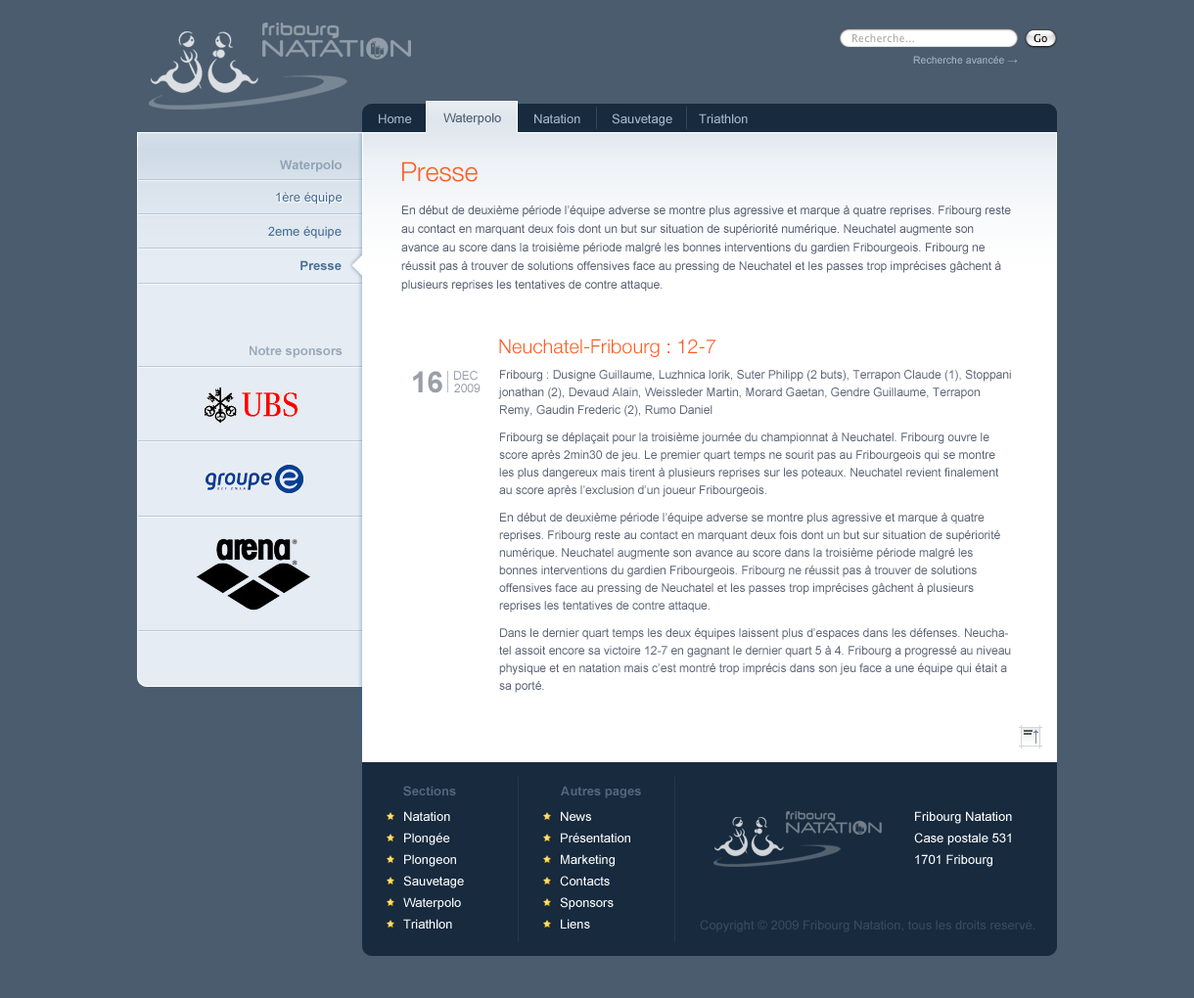
<style>
.page{position:relative;width:1194px;height:998px;background:#4a5c6e}
.page>*{position:absolute;margin:0}
.t1{font:10.3px "ArialMT";color:#a5b7ca}
.t2{font:12.7px "ArialMT";color:#a4b7cb}
.t3{font:12.7px "ArialMT";color:#4a5c6e}
.t4{font:12.7px "Arial-BoldMT";color:#8fa2b4}
.t5{font:26.4px "HelveticaNeue-Light";color:#fd5d25}
.t6{font:12.7px "ArialMT";color:#486e94}
.t7{font:11.7px/18.6px "ArialMT";color:#586073}
.t8{font:12.7px "Arial-BoldMT";color:#486e94}
.t9{font:19.6px "HelveticaNeue-Light";color:#fd5d25}
.t10{font:12.7px "Arial-BoldMT";color:#98a8b8}
.t11{font:29.4px "Arial-BoldMT";color:#999ea9}
.t12{font:11.7px "ArialMT";color:#979ca7}
.t13{font:11.7px/17.6px "ArialMT";color:#5d6476}
.t14{font:12.7px "Arial-BoldMT";color:#53667b}
.t15{font:12.7px/21.5px "ArialMT";color:#fcfdfd}
.t16{font:12.7px/21.5px "ArialMT";color:#ffffff}
.t17{font:12.7px "ArialMT";color:#364b61}
</style>
<div class="page">
<p class="t1" style="left:913px;top:56px;width:105px;height:8px">Recherche avancée →</p>
<p class="t2" style="left:379px;top:114px;width:33px;height:9px">Home</p>
<p class="t3" style="left:443px;top:113px;width:58px;height:12px">Waterpolo</p>
<p class="t2" style="left:534px;top:114px;width:46px;height:9px">Natation</p>
<p class="t2" style="left:612px;top:114px;width:61px;height:12px">Sauvetage</p>
<p class="t2" style="left:699px;top:114px;width:49px;height:9px">Triathlon</p>
<p class="t4" style="left:280px;top:160px;width:62px;height:12px">Waterpolo</p>
<p class="t5" style="left:402px;top:162px;width:76px;height:20px">Presse</p>
<p class="t6" style="left:276px;top:192px;width:67px;height:13px">1ère équipe</p>
<p class="t7" style="left:401px;top:206px;width:610px;height:86px">En début de deuxième période l’équipe adverse se montre plus agressive et marque à quatre reprises. Fribourg reste au contact en marquant deux fois dont un but sur situation de supériorité numérique. Neuchatel augmente son avance au score dans la troisième période malgré les bonnes interventions du gardien Fribourgeois. Fribourg ne réussit pas à trouver de solutions offensives face au pressing de Neuchatel et les passes trop imprécises gâchent à plusieurs reprises les tentatives de contre attaque.</p>
<p class="t6" style="left:268px;top:226px;width:74px;height:13px">2eme équipe</p>
<p class="t8" style="left:301px;top:260px;width:41px;height:10px">Presse</p>
<p class="t9" style="left:499px;top:339px;width:217px;height:18px">Neuchatel-Fribourg : 12-7</p>
<p class="t10" style="left:250px;top:346px;width:93px;height:12px">Notre sponsors</p>
<p class="t11" style="left:413px;top:371px;width:29px;height:23px">16</p>
<p class="t12" style="left:454px;top:371px;width:24px;height:10px">DEC</p>
<p class="t13" style="left:498px;top:370px;width:513px;height:323px">Fribourg : Dusigne Guillaume, Luzhnica lorik, Suter Philipp (2 buts), Terrapon Claude (1), Stoppani jonathan (2), Devaud Alain, Weissleder Martin, Morard Gaetan, Gendre Guillaume, Terrapon Remy, Gaudin Frederic (2), Rumo Daniel<br> <br>Fribourg se déplaçait pour la troisième journée du championnat à Neuchatel. Fribourg ouvre le score après 2min30 de jeu. Le premier quart temps ne sourit pas au Fribourgeois qui se montre les plus dangereux mais tirent à plusieurs reprises sur les poteaux. Neuchatel revient finalement au score après l’exclusion d’un joueur Fribourgeois.<br> <br>En début de deuxième période l’équipe adverse se montre plus agressive et marque à quatre reprises. Fribourg reste au contact en marquant deux fois dont un but sur situation de supériorité numérique. Neuchatel augmente son avance au score dans la troisième période malgré les bonnes interventions du gardien Fribourgeois. Fribourg ne réussit pas à trouver de solutions offensives face au pressing de Neuchatel et les passes trop imprécises gâchent à plusieurs reprises les tentatives de contre attaque.<br> <br>Dans le dernier quart temps les deux équipes laissent plus d’espaces dans les défenses. Neuchatel assoit encore sa victoire 12-7 en gagnant le dernier quart 5 à 4. Fribourg a progressé au niveau physique et en natation mais c’est montré trop imprécis dans son jeu face a une équipe qui était a sa porté.</p>
<p class="t12" style="left:454px;top:384px;width:27px;height:9px">2009</p>
<p class="t14" style="left:403px;top:786px;width:53px;height:11px">Sections</p>
<p class="t14" style="left:561px;top:786px;width:80px;height:13px">Autres pages</p>
<p class="t15" style="left:403px;top:812px;width:61px;height:117px">Natation<br>Plongée<br>Plongeon<br>Sauvetage<br>Waterpolo<br>Triathlon</p>
<p class="t15" style="left:560px;top:812px;width:70px;height:117px">News<br>Présentation<br>Marketing<br>Contacts<br>Sponsors<br>Liens</p>
<p class="t16" style="left:914px;top:812px;width:98px;height:55px">Fribourg Natation<br>Case postale 531<br>1701 Fribourg</p>
<p class="t17" style="left:700px;top:920px;width:336px;height:13px">Copyright © 2009 Fribourg Natation, tous les droits reservé.</p>
</div>
